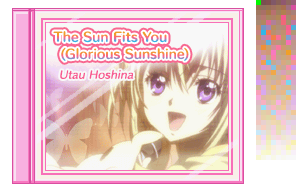
<style>
.page{position:relative;width:296px;height:192px}
.page>*{position:absolute;margin:0}
.t1{font:12px "HummingStd-B";letter-spacing:0.02em}
.t2{font:10px "HummingStd-D";letter-spacing:0.02em;color:#f85890;font-style:italic}
</style>
<div class="page">
<p class="t1" style="left:53px;top:31px;width:114px;height:12px">The Sun Fits You</p>
<p class="t1" style="left:61px;top:47px;width:128px;height:14px">(Glorious Sunshine)</p>
<p class="t2" style="left:60px;top:69px;width:74px;height:10px">Utau Hoshina</p>
</div>
